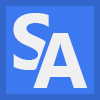
<style>
.page{position:relative;width:100px;height:100px;background:#3c78f0}
.page>*{position:absolute;margin:0}
.t1{font:78.1px "SegoeUI-Bold";color:#f0f0f0}
</style>
<div class="page">
<p class="t1" style="left:13px;top:13px;width:38px;height:57px">S</p>
<p class="t1" style="left:33px;top:33px;width:55px;height:55px">A</p>
</div>
